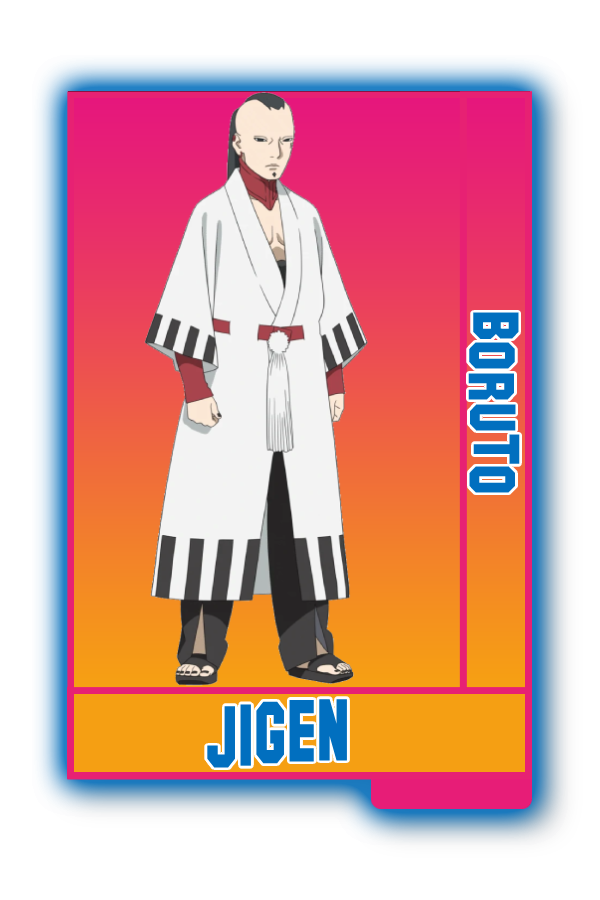
<style>
.page{position:relative;width:600px;height:900px;background:#ffffff}
.page>*{position:absolute;margin:0}
.t1{font:64.7px "SFHollywoodHills";color:#016fbf}
.t2{font:87.5px "SFHollywoodHills";color:#016fbf;scale:0.79 1}
</style>
<div class="page">
<p class="t1" style="left:468px;top:312px;width:52px;height:181px;rotate:90deg">Boruto</p>
<p class="t2" style="left:207px;top:699px;width:140px;height:69px">Jigen</p>
</div>
